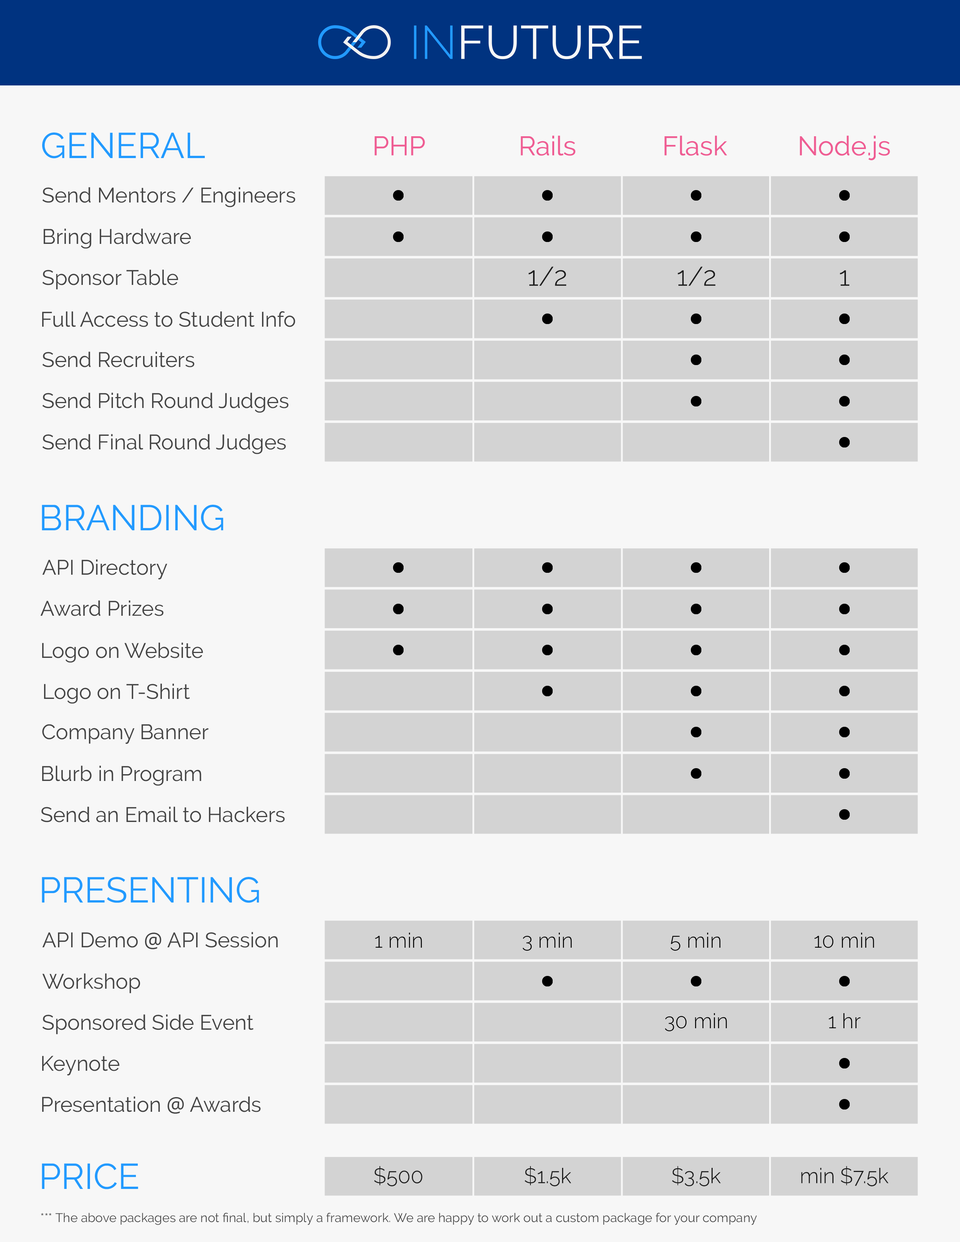
<style>
.page{position:relative;width:960px;height:1242px;background:#f7f7f7}
.page>*{position:absolute;margin:0}
.t1{font:47.1px "Raleway-Regular";color:#f7f7f7}
.t2{font:47.1px "Raleway-Light";color:#229aff}
.t3{font:35.8px "Raleway-Regular";color:#229aff}
.t4{font:26.8px "Raleway-Regular";color:#ef5d93}
.t5{font:20.9px "Raleway-Regular";color:#444444}
.t6{font:26.8px "Raleway-Light";color:#1d1d1d}
.t7{font:20.9px "OpenSans";color:#444444}
.t8{font:20.9px "Raleway-Light";color:#000000}
.t9{font:20.9px "Raleway-Light";color:#1d1d1d}
.t10{font:12.5px "Raleway-Regular";color:#444444}
</style>
<div class="page">
<p class="t1" style="left:414px;top:25px;width:228px;height:34px"><span class="t2">IN</span>FUTURE</p>
<p class="t3" style="left:42px;top:133px;width:163px;height:25px">GENERAL</p>
<p class="t4" style="left:375px;top:136px;width:50px;height:19px">PHP</p>
<p class="t4" style="left:521px;top:136px;width:55px;height:20px">Rails</p>
<p class="t4" style="left:664px;top:136px;width:63px;height:20px">Flask</p>
<p class="t4" style="left:800px;top:136px;width:90px;height:24px">Node.js</p>
<p class="t5" style="left:42px;top:187px;width:253px;height:20px">Send Mentors / Engineers</p>
<p class="t5" style="left:44px;top:228px;width:147px;height:21px">Bring Hardware</p>
<p class="t5" style="left:42px;top:270px;width:136px;height:19px">Sponsor Table</p>
<p class="t6" style="left:529px;top:267px;width:37px;height:19px">1/2</p>
<p class="t6" style="left:678px;top:267px;width:38px;height:19px">1/2</p>
<p class="t6" style="left:840px;top:270px;width:9px;height:16px">1</p>
<p class="t5" style="left:42px;top:311px;width:253px;height:16px">Full Access to Student Info</p>
<p class="t5" style="left:42px;top:352px;width:152px;height:15px">Send Recruiters</p>
<p class="t5" style="left:42px;top:393px;width:246px;height:20px">Send Pitch Round Judges</p>
<p class="t5" style="left:42px;top:434px;width:244px;height:20px">Send Final Round Judges</p>
<p class="t3" style="left:42px;top:505px;width:181px;height:26px">BRANDING</p>
<p class="t5" style="left:42px;top:559px;width:125px;height:21px">API Directory</p>
<p class="t5" style="left:40px;top:600px;width:123px;height:16px">Award Prizes</p>
<p class="t5" style="left:42px;top:643px;width:161px;height:20px">Logo on Website</p>
<p class="t5" style="left:44px;top:684px;width:146px;height:20px">Logo on T-Shirt</p>
<p class="t5" style="left:42px;top:724px;width:167px;height:20px">Company Banner</p>
<p class="t5" style="left:42px;top:766px;width:159px;height:20px">Blurb in Program</p>
<p class="t5" style="left:41px;top:807px;width:244px;height:16px">Send an Email to Hackers</p>
<p class="t3" style="left:42px;top:877px;width:217px;height:26px">PRESENTING</p>
<p class="t5" style="left:42px;top:932px;width:236px;height:17px">API Demo <span class="t7">@</span> API Session</p>
<p class="t8" style="left:375px;top:933px;width:47px;height:15px">1 min</p>
<p class="t8" style="left:522px;top:933px;width:50px;height:18px">3 min</p>
<p class="t8" style="left:670px;top:933px;width:50px;height:18px">5 min</p>
<p class="t8" style="left:814px;top:933px;width:60px;height:15px">10 min</p>
<p class="t5" style="left:42px;top:973px;width:98px;height:20px">Workshop</p>
<p class="t8" style="left:665px;top:1013px;width:62px;height:18px">30 min</p>
<p class="t8" style="left:829px;top:1013px;width:32px;height:15px">1 hr</p>
<p class="t5" style="left:42px;top:1014px;width:211px;height:20px">Sponsored Side Event</p>
<p class="t5" style="left:42px;top:1056px;width:77px;height:20px">Keynote</p>
<p class="t5" style="left:42px;top:1097px;width:218px;height:17px">Presentation <span class="t7">@</span> Awards</p>
<p class="t3" style="left:42px;top:1164px;width:96px;height:26px">PRICE</p>
<p class="t9" style="left:374px;top:1166px;width:48px;height:21px">$500</p>
<p class="t9" style="left:524px;top:1166px;width:47px;height:21px">$1.5k</p>
<p class="t9" style="left:672px;top:1166px;width:49px;height:21px">$3.5k</p>
<p class="t9" style="left:801px;top:1166px;width:87px;height:21px">min $7.5k</p>
<p class="t10" style="left:41px;top:1213px;width:716px;height:12px">*** The above packages are not final, but simply a framework. We are happy to work out a custom package for your company</p>
</div>
